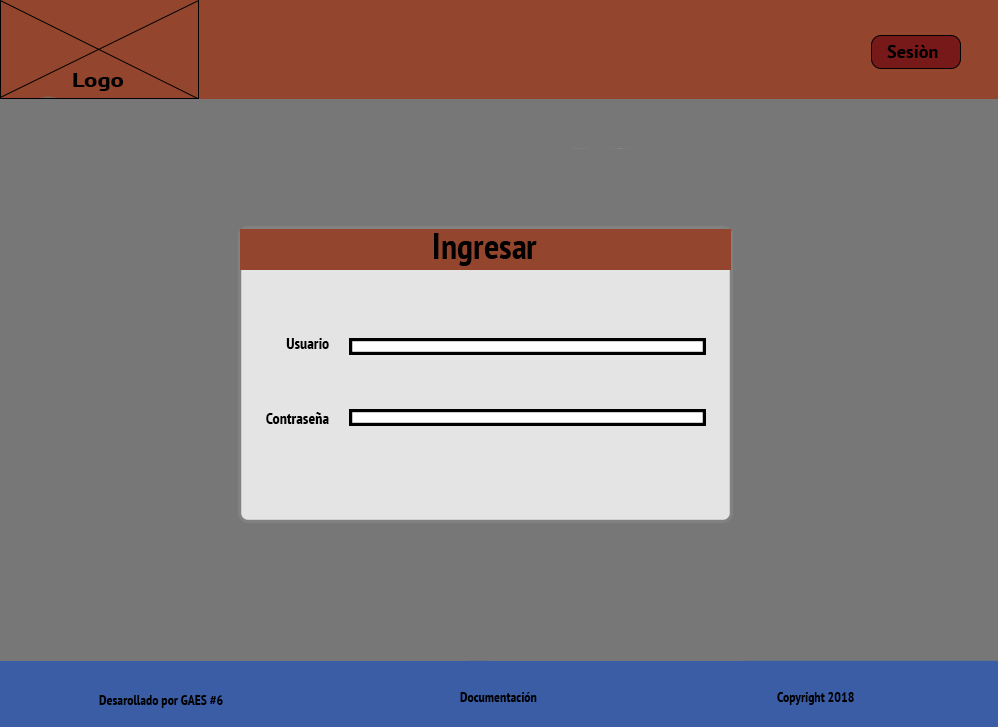
<style>
.page{position:relative;width:998px;height:727px;background:#777777}
.page>*{position:absolute;margin:0}
.t1{font:17.8px "PTSans-NarrowBold";color:#000000;scale:1.23 1}
.t2{font:19.6px "PTSans-NarrowBold";color:#000000;scale:1.53 1}
.t3{font:36px "PTSans-NarrowBold";color:#000000}
.t4{font:16px "PTSans-NarrowBold";color:#000000}
.t5{font:14px "PTSans-NarrowBold";color:#000000}
</style>
<div class="page">
<p class="t1" style="left:887px;top:45px;width:51px;height:13px">Sesiòn</p>
<p class="t2" style="left:73px;top:73px;width:51px;height:18px">Logo</p>
<p class="t3" style="left:434px;top:233px;width:103px;height:33px">Ingresar</p>
<p class="t4" style="left:286px;top:338px;width:43px;height:11px">Usuario</p>
<p class="t4" style="left:266px;top:412px;width:63px;height:12px">Contraseña</p>
<p class="t5" style="left:99px;top:695px;width:124px;height:13px">Desarollado por GAES #6</p>
<p class="t5" style="left:460px;top:692px;width:77px;height:10px">Documentación</p>
<p class="t5" style="left:777px;top:692px;width:77px;height:13px">Copyright 2018</p>
</div>
